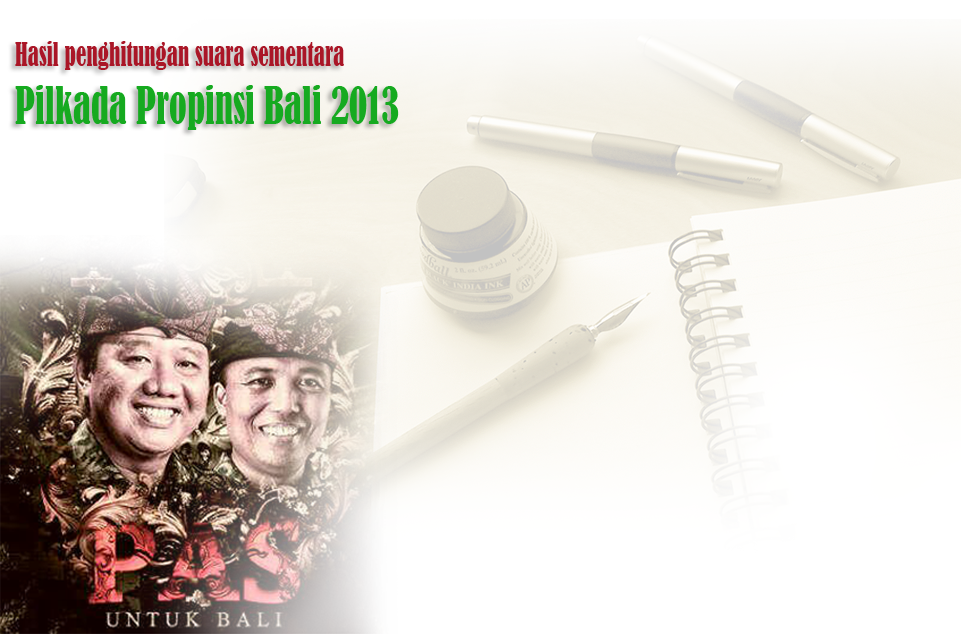
<style>
.page{position:relative;width:961px;height:634px}
.page>*{position:absolute;margin:0}
.t1{font:30px "BernardMT-Condensed";color:#aa1627;scale:0.78 1}
.t2{font:48px "BernardMT-Condensed";color:#16aa20;scale:0.78 1}
</style>
<div class="page">
<p class="t1" style="left:15px;top:41px;width:384px;height:89px">Hasil penghitungan suara sementara <br><span class="t2">Pilkada Propinsi Bali 2013</span></p>
</div>
